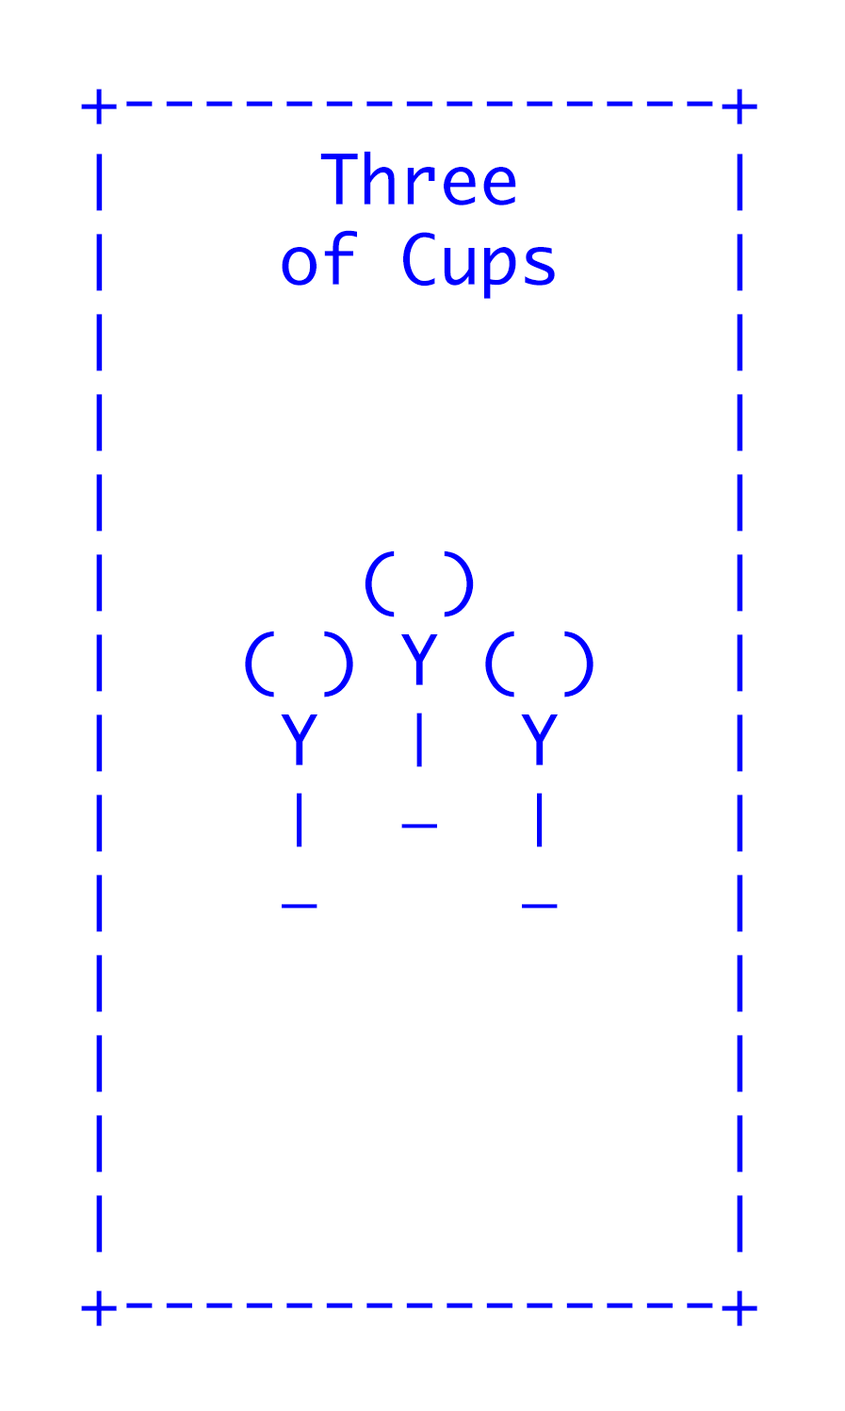
<style>
.page{position:relative;width:845px;height:1411px;background:#ffffff}
.page>*{position:absolute;margin:0}
.t1{font:66.7px "Monaco";color:#0000ff}
</style>
<div class="page">
<p class="t1" style="left:81px;top:89px;width:677px;height:1237px">+---------------+<br>│     Three     │<br>│    of Cups    │<br>│               │<br>│               │ <br>│               │<br>│      ( )      │<br>│   ( ) Y ( )   │ <br>│    Y  |  Y    │<br>│    |  —  |    │ <br>│    —     —    │  <br>│               │<br>│               │ <br>│               │ <br>│               │<br>+---------------+</p>
</div>
